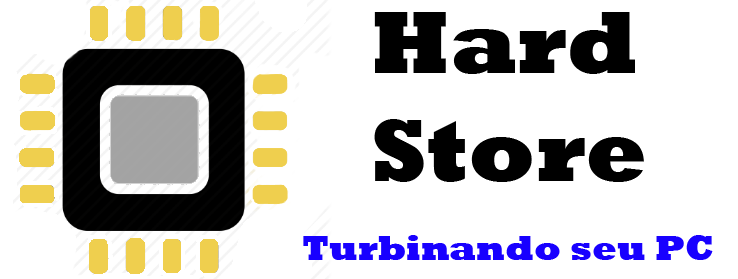
<style>
.page{position:relative;width:738px;height:279px;background:#ffffff}
.page>*{position:absolute;margin:0}
.t1{font:90px "Rockwell-ExtraBold";color:#000000}
.t2{font:36px "Rockwell-ExtraBold";color:#1800ff}
</style>
<div class="page">
<p class="t1" style="left:374px;top:12px;width:270px;height:170px">Hard <br>Store</p>
<p class="t2" style="left:303px;top:235px;width:410px;height:25px">Turbinando seu PC</p>
</div>
